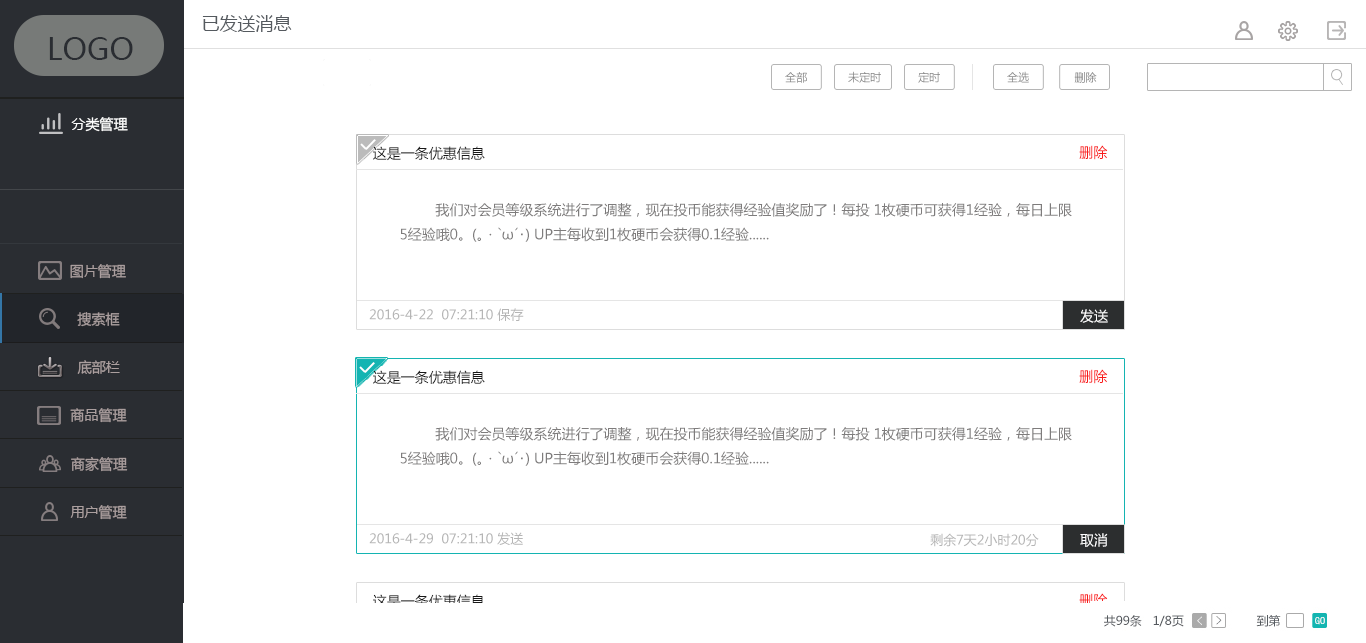
<style>
.page{position:relative;width:1366px;height:643px;background:#ffffff}
.page>*{position:absolute;margin:0}
.t1{font:18px "MicrosoftYaHei";color:#555a5f}
.t2{font:30px "MicrosoftYaHei";color:#2a2d32}
.t3{font:11.2px "MicrosoftYaHei";color:#808080}
.t4{font:11.2px "MicrosoftYaHei"}
.t5{font:14px "MicrosoftYaHei";color:#ffffff}
.t6{font:14px "MicrosoftYaHei";color:#181818}
.t7{font:14px "MicrosoftYaHei";color:#f91b1b}
.t8{font:14px "MicrosoftYaHei";color:#7e7c7c}
.t9{font:14px "MicrosoftYaHei";color:#ab9f9f}
.t10{font:13px "MicrosoftYaHei";color:#b5b5b5}
.t11{font:14px "MicrosoftYaHei"}
</style>
<div class="page">
<p class="t1" style="left:202px;top:15px;width:90px;height:17px">已发送消息</p>
<p class="t2" style="left:49px;top:37px;width:84px;height:23px">LOGO</p>
<p class="t3" style="left:785px;top:72px;width:22px;height:11px">全部</p>
<p class="t3" style="left:848px;top:71px;width:33px;height:12px">未定时</p>
<p class="t3" style="left:918px;top:72px;width:22px;height:11px">定时</p>
<p class="t4" style="left:1007px;top:71px;width:22px;height:12px">全选</p>
<p class="t3" style="left:1074px;top:72px;width:23px;height:11px">删除</p>
<p class="t5" style="left:71px;top:117px;width:57px;height:15px">分类管理</p>
<p class="t6" style="left:373px;top:146px;width:112px;height:15px">这是一条优惠信息</p>
<p class="t7" style="left:1079px;top:145px;width:29px;height:15px">删除</p>
<p class="t8" style="left:400px;top:203px;width:672px;height:39px">我们对会员等级系统进行了调整，现在投币能获得经验值奖励了！每投 1枚硬币可获得1经验，每日上限<br>5经验哦0。(｡・`ω´･) UP主每收到1枚硬币会获得0.1经验......</p>
<p class="t9" style="left:70px;top:264px;width:56px;height:15px">图片管理</p>
<p class="t9" style="left:77px;top:312px;width:43px;height:15px">搜索框</p>
<p class="t10" style="left:369px;top:308px;width:155px;height:13px">2016-4-22  07:21:10 保存</p>
<p class="t5" style="left:1080px;top:309px;width:28px;height:14px">发送</p>
<p class="t9" style="left:77px;top:360px;width:43px;height:14px">底部栏</p>
<p class="t6" style="left:373px;top:370px;width:112px;height:15px">这是一条优惠信息</p>
<p class="t7" style="left:1079px;top:369px;width:29px;height:15px">删除</p>
<p class="t9" style="left:70px;top:408px;width:57px;height:15px">商品管理</p>
<p class="t8" style="left:400px;top:427px;width:672px;height:39px">我们对会员等级系统进行了调整，现在投币能获得经验值奖励了！每投 1枚硬币可获得1经验，每日上限<br>5经验哦0。(｡・`ω´･) UP主每收到1枚硬币会获得0.1经验......</p>
<p class="t9" style="left:71px;top:457px;width:57px;height:15px">商家管理</p>
<p class="t9" style="left:70px;top:505px;width:57px;height:15px">用户管理</p>
<p class="t10" style="left:369px;top:532px;width:154px;height:13px">2016-4-29  07:21:10 发送</p>
<p class="t10" style="left:930px;top:533px;width:109px;height:14px">剩余7天2小时20分</p>
<p class="t5" style="left:1080px;top:533px;width:28px;height:14px">取消</p>
<p class="t11" style="left:1079px;top:593px;width:29px;height:15px">删除</p>
<p class="t6" style="left:373px;top:594px;width:112px;height:15px">这是一条优惠信息</p>
</div>
